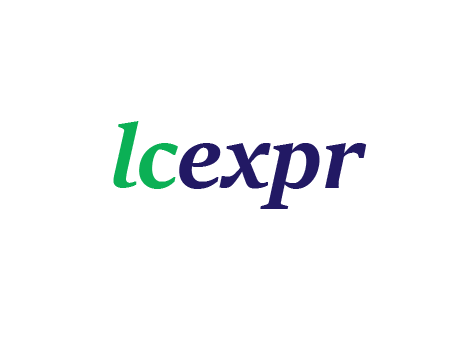
<style>
.page{position:relative;width:454px;height:340px;background:#ffffff}
.page>*{position:absolute;margin:0}
.t1{font:100px "SitkaDisplay-BoldItalic";color:#221964}
.t2{font:100px "SitkaDisplay-BoldItalic";color:#0bb055}
</style>
<div class="page">
<p class="t1" style="left:113px;top:121px;width:254px;height:88px"><span class="t2">lc</span>expr</p>
</div>
